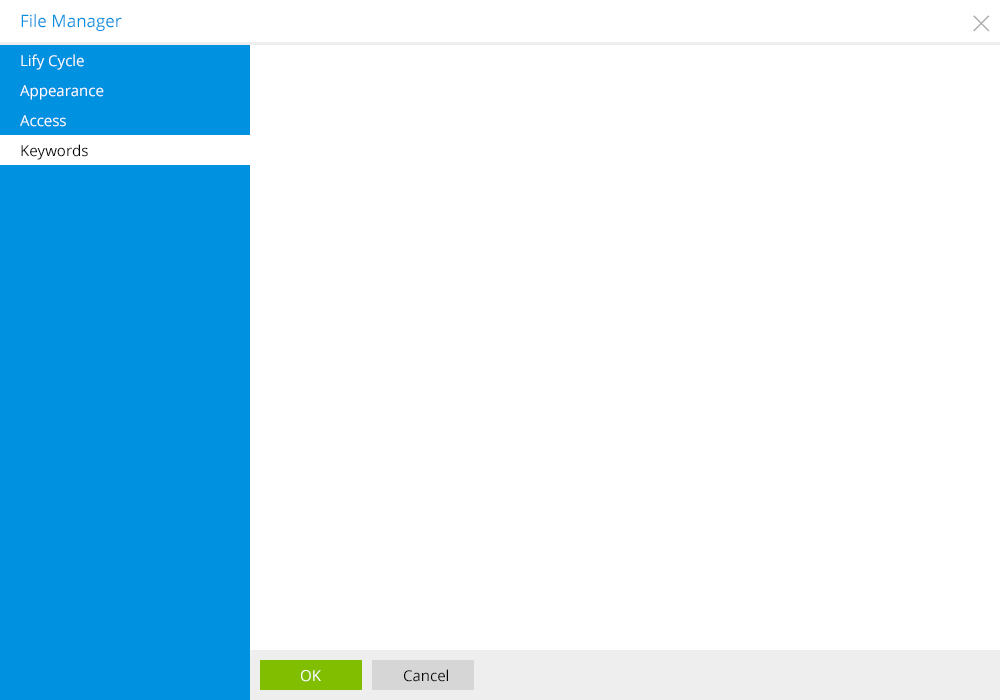
<style>
.page{position:relative;width:1000px;height:700px;background:#ffffff}
.page>*{position:absolute;margin:0}
.t1{font:17px "OpenSans";color:#0091e1}
.t2{font:36px "OpenSans-Light";color:#aaaaaa}
.t3{font:15px "OpenSans";color:#ffffff}
.t4{font:15px "OpenSans";color:#000000}
</style>
<div class="page">
<p class="t1" style="left:21px;top:14px;width:101px;height:17px">File Manager</p>
<p class="t2" style="left:973px;top:15px;width:17px;height:17px">×</p>
<p class="t3" style="left:21px;top:54px;width:63px;height:16px">Lify Cycle</p>
<p class="t3" style="left:20px;top:85px;width:84px;height:15px">Appearance</p>
<p class="t3" style="left:20px;top:115px;width:46px;height:12px">Access</p>
<p class="t4" style="left:21px;top:144px;width:67px;height:16px">Keywords</p>
<p class="t3" style="left:301px;top:670px;width:20px;height:12px">OK</p>
<p class="t4" style="left:404px;top:669px;width:44px;height:13px">Cancel</p>
</div>
